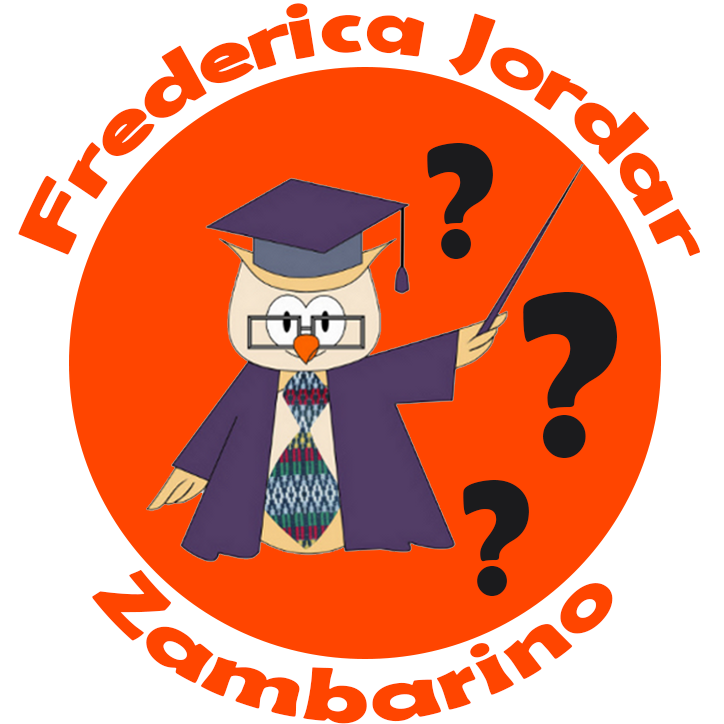
<style>
.page{position:relative;width:724px;height:724px;background:#ff4500}
.page>*{position:absolute;margin:0}
.t1{font:165.7px "BerlinSansFBDemi-Bold";color:#1b1b1d}
.t2{font:237.1px "BerlinSansFBDemi-Bold";color:#1b1b1d}
.t3{font:77px "BerlinSansFBDemi-Bold";color:#ff4500;scale:1.1 1}
</style>
<div class="page">
<p class="t1" style="left:427px;top:143px;width:66px;height:116px">?</p>
<p class="t2" style="left:523px;top:292px;width:94px;height:166px">?</p>
<p class="t1" style="left:463px;top:480px;width:66px;height:116px">?</p>
<p class="t3" style="left:92px;top:570px;width:521px;height:154px;text-align:right">Zambarino</p>
</div>
